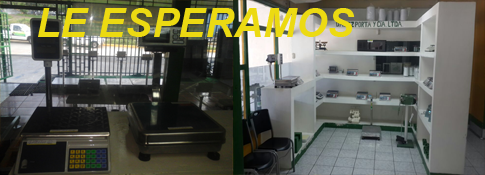
<style>
.page{position:relative;width:485px;height:175px}
.page>*{position:absolute;margin:0}
.t1{font:40px "Arial-BoldItalicMT";color:#ecda12}
</style>
<div class="page">
<p class="t1" style="left:38px;top:8px;width:317px;height:29px">LE ESPERAMOS</p>
</div>
